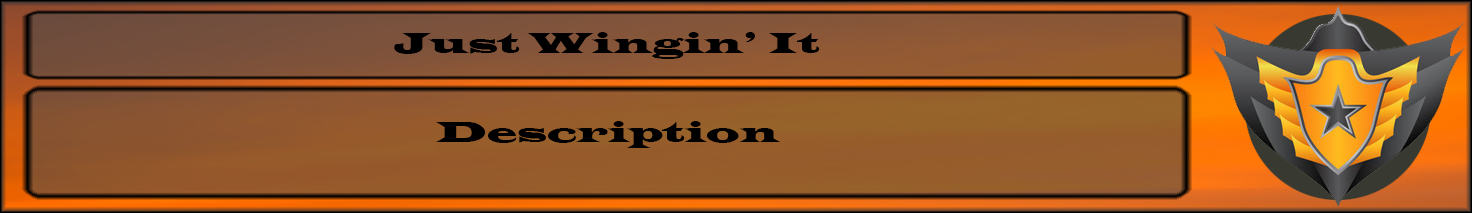
<style>
.page{position:relative;width:1472px;height:213px}
.page>*{position:absolute;margin:0}
.t1{font:30px "LatinWide";color:#000000;scale:1.14 1}
</style>
<div class="page">
<p class="t1" style="left:394px;top:32px;width:426px;height:27px">Just Wingin’ It</p>
<p class="t1" style="left:436px;top:121px;width:344px;height:27px">Description</p>
</div>
